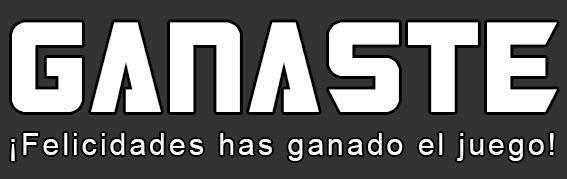
<style>
.page{position:relative;width:567px;height:179px;background:#333333}
.page>*{position:absolute;margin:0}
.t1{font:74.5px "Transformers";letter-spacing:0.095em;color:#ffffff;scale:1.04 1}
.t2{font:30.4px "ArialMT";letter-spacing:0.095em;color:#ffffff}
</style>
<div class="page">
<p class="t1" style="left:12px;top:22px;width:545px;height:90px">GANASTE</p>
<p class="t2" style="left:11px;top:133px;width:543px;height:28px">¡Felicidades has ganado el juego!</p>
</div>
